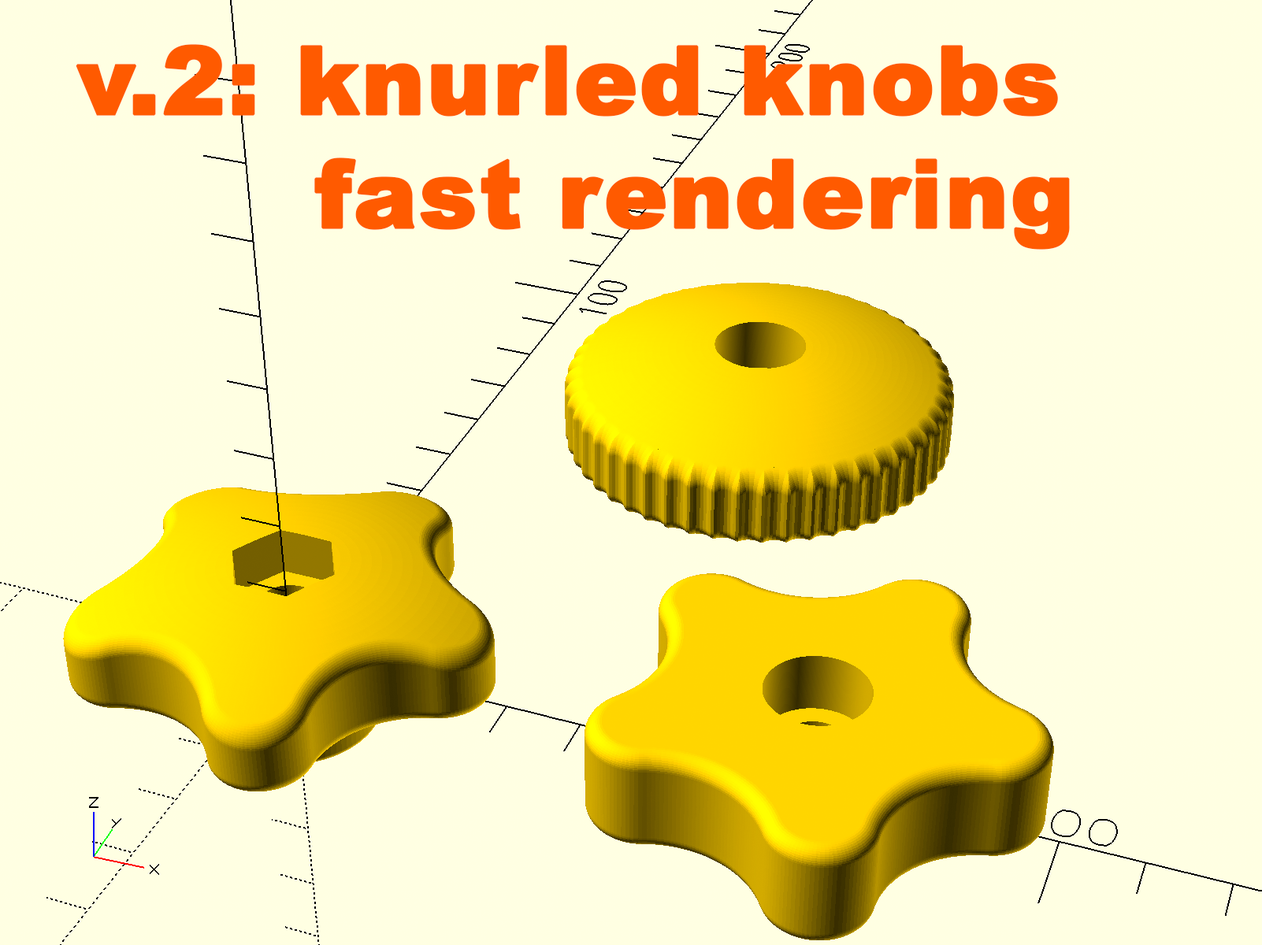
<style>
.page{position:relative;width:1262px;height:945px;background:#ffffe2}
.page>*{position:absolute;margin:0}
.t1{font:94.5px "Arial-Black";color:#ff5a00;font-weight:bold}
</style>
<div class="page">
<p class="t1" style="left:76px;top:44px;width:994px;height:206px">v.2: knurled knobs<br>       fast rendering</p>
</div>
